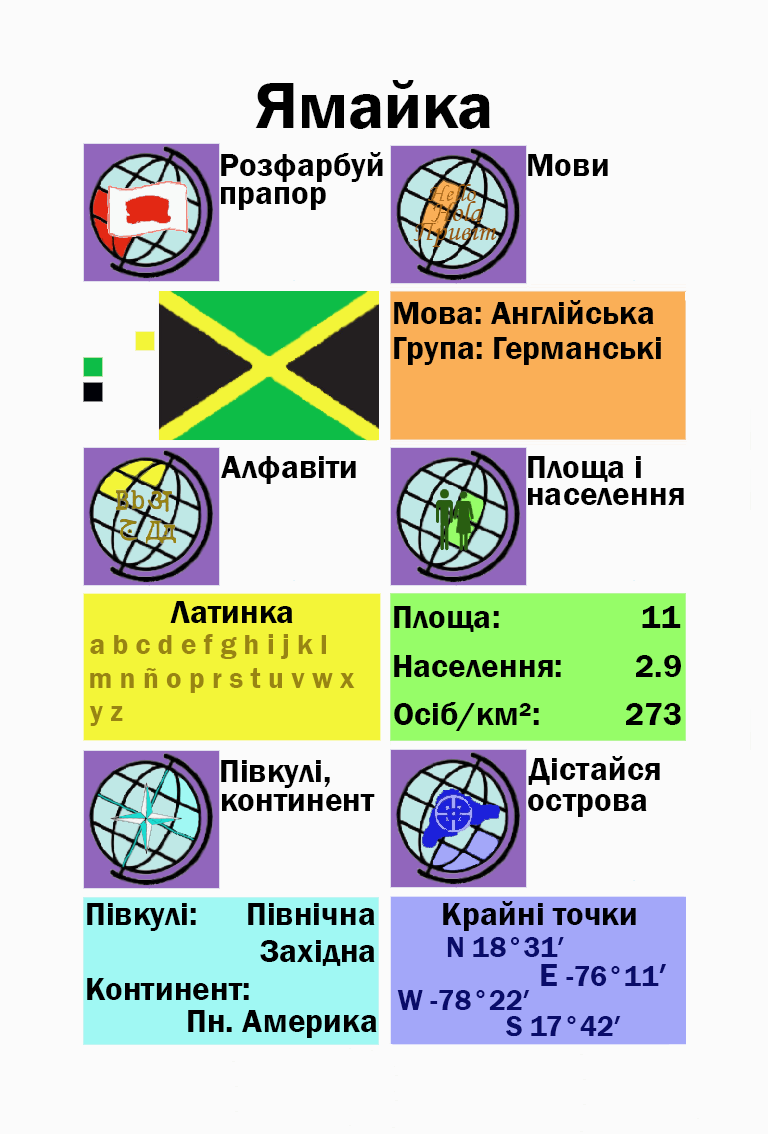
<style>
.page{position:relative;width:768px;height:1134px;background:#fbfbfb}
.page>*{position:absolute;margin:0}
.t1{font:66.7px "FranklinGothic-Demi";color:#000000}
.t2{font:33.3px "FranklinGothic-Demi";color:#000000}
.t3{font:33.3px "FranklinGothic-Demi";color:#000003}
.t4{font:29.2px "FranklinGothic-Demi";color:#988413}
.t5{font:29.2px "FranklinGothic-Demi";color:#090c69}
.t6{font:33.3px "FranklinGothic-Demi";color:#090c69}
</style>
<div class="page">
<p class="t1" style="left:255px;top:80px;width:235px;height:49px">Ямайка</p>
<p class="t2" style="left:221px;top:152px;width:162px;height:30px">Розфарбуй</p>
<p class="t2" style="left:528px;top:154px;width:80px;height:22px">Мови</p>
<p class="t2" style="left:221px;top:187px;width:105px;height:23px">прапор</p>
<p class="t2" style="left:394px;top:300px;width:260px;height:24px">Мова: Англійська</p>
<p class="t2" style="left:394px;top:337px;width:267px;height:28px">Група: Германські</p>
<p class="t2" style="left:221px;top:456px;width:135px;height:28px">Алфавіти</p>
<p class="t2" style="left:528px;top:456px;width:113px;height:26px">Площа і</p>
<p class="t2" style="left:528px;top:488px;width:156px;height:17px">населення</p>
<p class="t2" style="left:170px;top:601px;width:123px;height:22px">Латинка</p>
<p class="t2" style="left:394px;top:606px;width:105px;height:26px">Площа:</p>
<p class="t3" style="left:642px;top:606px;width:39px;height:22px">11</p>
<p class="t4" style="left:90px;top:634px;width:236px;height:25px">a b c d e f g h i j k l</p>
<p class="t2" style="left:394px;top:655px;width:167px;height:22px">Населення:</p>
<p class="t2" style="left:636px;top:655px;width:45px;height:22px">2.9</p>
<p class="t4" style="left:90px;top:668px;width:265px;height:25px">m n ñ o p r s t u v w x</p>
<p class="t2" style="left:394px;top:702px;width:145px;height:29px">Осіб/км²:</p>
<p class="t4" style="left:89px;top:706px;width:34px;height:20px">y z</p>
<p class="t2" style="left:626px;top:703px;width:55px;height:22px">273</p>
<p class="t2" style="left:221px;top:760px;width:109px;height:28px">Півкулі,</p>
<p class="t2" style="left:528px;top:756px;width:132px;height:29px">Дістайся</p>
<p class="t2" style="left:222px;top:794px;width:153px;height:17px">континент</p>
<p class="t2" style="left:528px;top:794px;width:119px;height:23px">острова</p>
<p class="t2" style="left:87px;top:903px;width:109px;height:28px">Півкулі:</p>
<p class="t2" style="left:248px;top:903px;width:127px;height:22px">Північна</p>
<p class="t3" style="left:443px;top:901px;width:193px;height:30px">Крайні точки</p>
<p class="t2" style="left:260px;top:940px;width:115px;height:26px">Західна</p>
<p class="t5" style="left:447px;top:937px;width:117px;height:20px">N 18°31′</p>
<p class="t5" style="left:541px;top:964px;width:125px;height:22px"><span class="t6">E </span>-76°11<span class="t6">′</span></p>
<p class="t2" style="left:87px;top:978px;width:162px;height:22px">Континент:</p>
<p class="t5" style="left:397px;top:990px;width:133px;height:20px">W -78°22′</p>
<p class="t2" style="left:188px;top:1010px;width:189px;height:28px">Пн. Америка</p>
<p class="t5" style="left:506px;top:1016px;width:115px;height:21px">S 17°42′</p>
</div>
